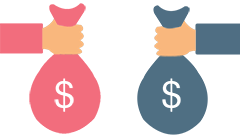
<style>
.page{position:relative;width:240px;height:138px;background:#ffffff}
.page>*{position:absolute;margin:0}
.t1{font:37.4px "HelveticaLTStd-Roman";color:#ffffff}
</style>
<div class="page">
<p class="t1" style="left:54px;top:78px;width:20px;height:34px">$</p>
<p class="t1" style="left:162px;top:78px;width:19px;height:34px">$</p>
</div>
